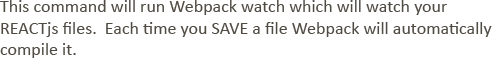
<style>
.page{position:relative;width:500px;height:70px;background:#ffffff}
.page>*{position:absolute;margin:0}
.t1{font:18px "Calibri";color:#504b43}
</style>
<div class="page">
<p class="t1" style="left:0px;top:0px;width:492px;height:58px">This command will run Webpack watch which will watch your         REACTjs files.  Each time you SAVE a file Webpack will automatically compile it.</p>
</div>
